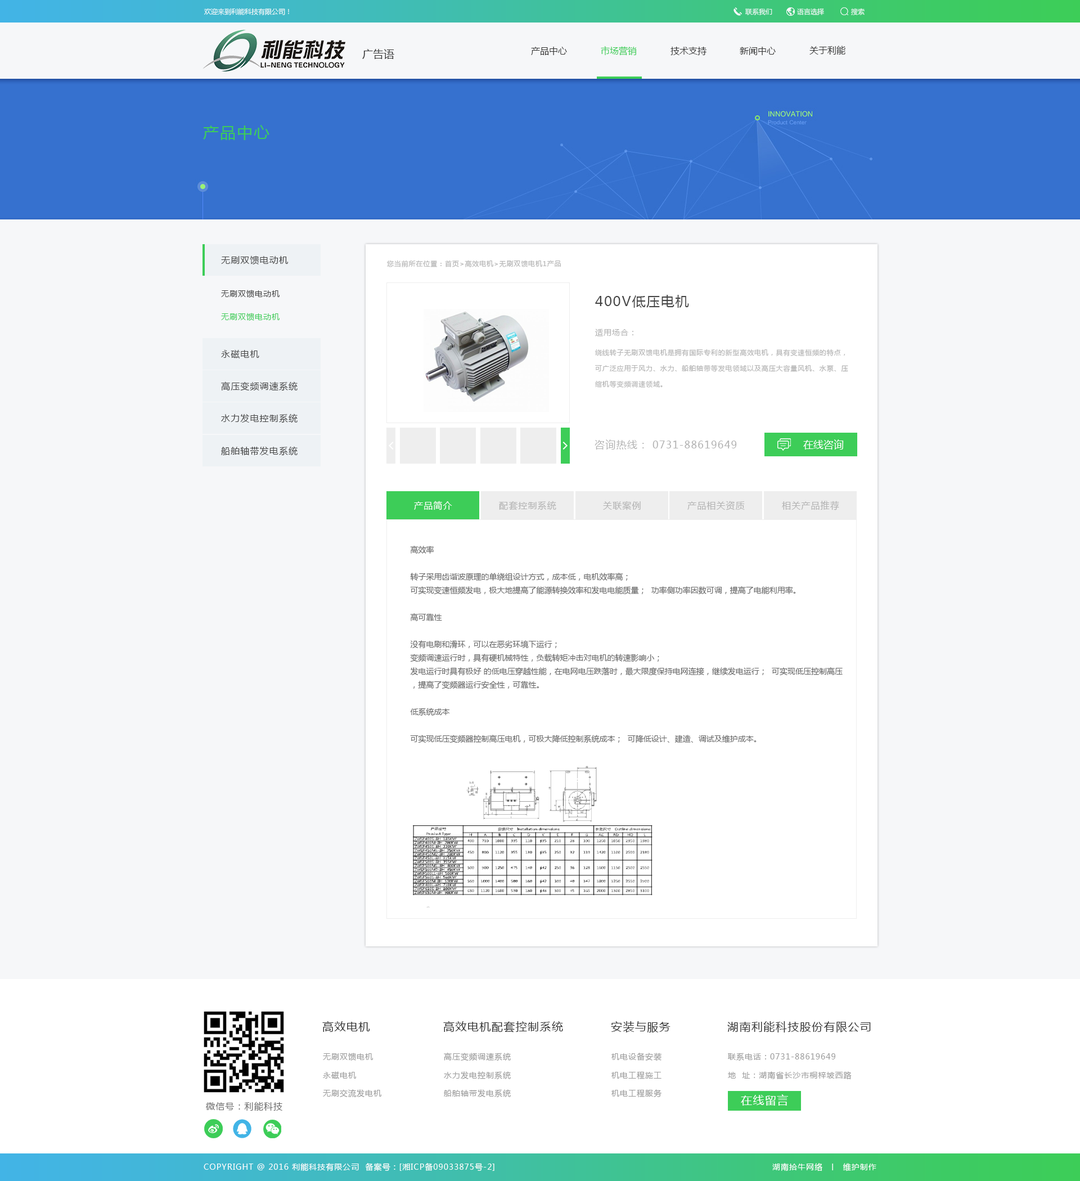
<style>
.page{position:relative;width:1080px;height:1181px;background:#f6f7f9}
.page>*{position:absolute;margin:0}
.t1{font:6.8px "MicrosoftYaHei";color:#f6f7f9}
.t2{font:10.7px "MicrosoftYaHei";color:#343434}
.t3{font:9px "MicrosoftYaHei";color:#343434}
.t4{font:9px "MicrosoftYaHei";color:#3dcd58}
.t5{font:15.7px "MicrosoftYaHei";letter-spacing:0.072em;color:#3dcd58}
.t6{font:9px "MicrosoftYaHei";letter-spacing:0.072em;color:#444444}
.t7{font:6.8px "MicrosoftYaHei";letter-spacing:0.072em;color:#b3b3b3}
.t8{font:7.9px "MicrosoftYaHei";letter-spacing:0.072em;color:#444444}
.t9{font:13.5px "MicrosoftYaHei";letter-spacing:0.072em;color:#444444}
.t10{font:7.9px "MicrosoftYaHei";letter-spacing:0.072em;color:#3dcd58}
.t11{font:7.9px "MicrosoftYaHei";letter-spacing:0.072em;color:#b3b3b3}
.t12{font:6.8px/15.8px "MicrosoftYaHei";letter-spacing:0.072em;color:#b3b3b3}
.t13{font:10.1px "MicrosoftYaHei";letter-spacing:0.072em;color:#b3b3b3}
.t14{font:10.1px "MicrosoftYaHei";color:#ffffff}
.t15{font:9px "MicrosoftYaHei";letter-spacing:0.072em;color:#ffffff}
.t16{font:9px "MicrosoftYaHei";letter-spacing:0.072em;color:#b3b3b3}
.t17{font:7.9px/13.5px "MicrosoftYaHei";color:#656565}
.t18{font:11.2px "MicrosoftYaHei";letter-spacing:0.072em;color:#323232}
.t19{font:7.9px "MicrosoftYaHei";letter-spacing:0.072em;color:#9a9a9a}
.t20{font:11.2px "MicrosoftYaHei";letter-spacing:0.072em;color:#ffffff}
.t21{font:9px "MicrosoftYaHei";letter-spacing:0.072em;color:#676767}
.t22{font:7.9px "MicrosoftYaHei";letter-spacing:0.072em;color:#ffffff}
</style>
<div class="page">
<p class="t1" style="left:204px;top:8px;width:85px;height:7px">欢迎来到利能科技有限公司！</p>
<p class="t1" style="left:745px;top:8px;width:27px;height:7px">联系我们</p>
<p class="t1" style="left:797px;top:8px;width:27px;height:7px">语言选择</p>
<p class="t1" style="left:851px;top:8px;width:14px;height:7px">搜索</p>
<p class="t2" style="left:362px;top:49px;width:32px;height:10px">广告语</p>
<p class="t3" style="left:531px;top:47px;width:36px;height:8px">产品中心</p>
<p class="t4" style="left:601px;top:46px;width:36px;height:10px">市场营销</p>
<p class="t3" style="left:670px;top:47px;width:36px;height:8px">技术支持</p>
<p class="t3" style="left:740px;top:47px;width:36px;height:8px">新闻中心</p>
<p class="t3" style="left:809px;top:46px;width:36px;height:9px">关于利能</p>
<p class="t5" style="left:203px;top:125px;width:66px;height:15px">产品中心</p>
<p class="t6" style="left:221px;top:255px;width:67px;height:9px">无刷双馈电动机</p>
<p class="t7" style="left:387px;top:260px;width:174px;height:7px">您当前所在位置：首页&gt;高效电机&gt;无刷双馈电机1产品</p>
<p class="t8" style="left:221px;top:290px;width:59px;height:8px">无刷双馈电动机</p>
<p class="t9" style="left:595px;top:295px;width:94px;height:13px">400V低压电机</p>
<p class="t10" style="left:221px;top:313px;width:59px;height:8px">无刷双馈电动机</p>
<p class="t11" style="left:595px;top:328px;width:38px;height:8px">适用场合：</p>
<p class="t6" style="left:221px;top:349px;width:38px;height:10px">永磁电机</p>
<p class="t12" style="left:595px;top:349px;width:253px;height:39px">绕线转子无刷双馈电机是拥有国际专利的新型高效电机，具有变速恒频的特点，可广泛应用于风力、水力、船舶轴带等发电领域以及高压大容量风机、水泵、压缩机等变频调速领域。</p>
<p class="t6" style="left:221px;top:381px;width:77px;height:10px">高压变频调速系统</p>
<p class="t6" style="left:221px;top:413px;width:77px;height:10px">水力发电控制系统</p>
<p class="t6" style="left:221px;top:446px;width:77px;height:10px">船舶轴带发电系统</p>
<p class="t13" style="left:595px;top:439px;width:142px;height:10px">咨询热线： 0731-88619649</p>
<p class="t14" style="left:803px;top:439px;width:41px;height:10px">在线咨询</p>
<p class="t15" style="left:414px;top:501px;width:38px;height:9px">产品简介</p>
<p class="t16" style="left:499px;top:501px;width:57px;height:9px">配套控制系统</p>
<p class="t16" style="left:603px;top:501px;width:38px;height:9px">关联案例</p>
<p class="t16" style="left:687px;top:501px;width:58px;height:9px">产品相关资质</p>
<p class="t16" style="left:782px;top:501px;width:57px;height:9px">相关产品推荐</p>
<p class="t17" style="left:410px;top:546px;width:433px;height:197px">高效率<br> <br>转子采用齿谐波原理的单绕组设计方式，成本低，电机效率高；<br>可实现变速恒频发电，极大地提高了能源转换效率和发电电能质量；  功率侧功率因数可调，提高了电能利用率。<br> <br>高可靠性<br><br>没有电刷和滑环，可以在恶劣环境下运行；<br>变频调速运行时，具有硬机械特性，负载转矩冲击对电机的转速影响小；<br>发电运行时具有极好 的低电压穿越性能，在电网电压跌落时，最大限度保持电网连接，继续发电运行；  可实现低压控制高压，提高了变频器运行安全性，可靠性。<br> <br>低系统成本<br> <br>可实现低压变频器控制高压电机，可极大降低控制系统成本；  可降低设计、建造、调试及维护成本。</p>
<p class="t18" style="left:322px;top:1021px;width:48px;height:11px">高效电机</p>
<p class="t18" style="left:443px;top:1021px;width:120px;height:11px">高效电机配套控制系统</p>
<p class="t18" style="left:611px;top:1021px;width:59px;height:11px">安装与服务</p>
<p class="t18" style="left:727px;top:1021px;width:144px;height:11px">湖南利能科技股份有限公司</p>
<p class="t19" style="left:323px;top:1052px;width:50px;height:8px">无刷双馈电机</p>
<p class="t19" style="left:444px;top:1052px;width:67px;height:9px">高压变频调速系统</p>
<p class="t19" style="left:611px;top:1052px;width:51px;height:8px">机电设备安装</p>
<p class="t19" style="left:728px;top:1052px;width:107px;height:8px">联系电话：0731-88619649</p>
<p class="t19" style="left:323px;top:1071px;width:33px;height:8px">永磁电机</p>
<p class="t19" style="left:444px;top:1071px;width:67px;height:8px">水力发电控制系统</p>
<p class="t19" style="left:611px;top:1071px;width:51px;height:8px">机电工程施工</p>
<p class="t19" style="left:728px;top:1071px;width:124px;height:8px">地  址：湖南省长沙市桐梓坡西路</p>
<p class="t19" style="left:323px;top:1089px;width:58px;height:8px">无刷交流发电机</p>
<p class="t19" style="left:444px;top:1089px;width:67px;height:8px">船舶轴带发电系统</p>
<p class="t19" style="left:611px;top:1089px;width:51px;height:8px">机电工程服务</p>
<p class="t20" style="left:741px;top:1094px;width:47px;height:11px">在线留言</p>
<p class="t21" style="left:206px;top:1101px;width:76px;height:10px">微信号：利能科技</p>
<p class="t22" style="left:204px;top:1163px;width:290px;height:8px">COPYRIGHT @ 2016 利能科技有限公司  备案号：[湘ICP备09033875号-2]</p>
<p class="t22" style="left:772px;top:1163px;width:104px;height:8px">湖南拾牛网络  丨  维护制作</p>
</div>
